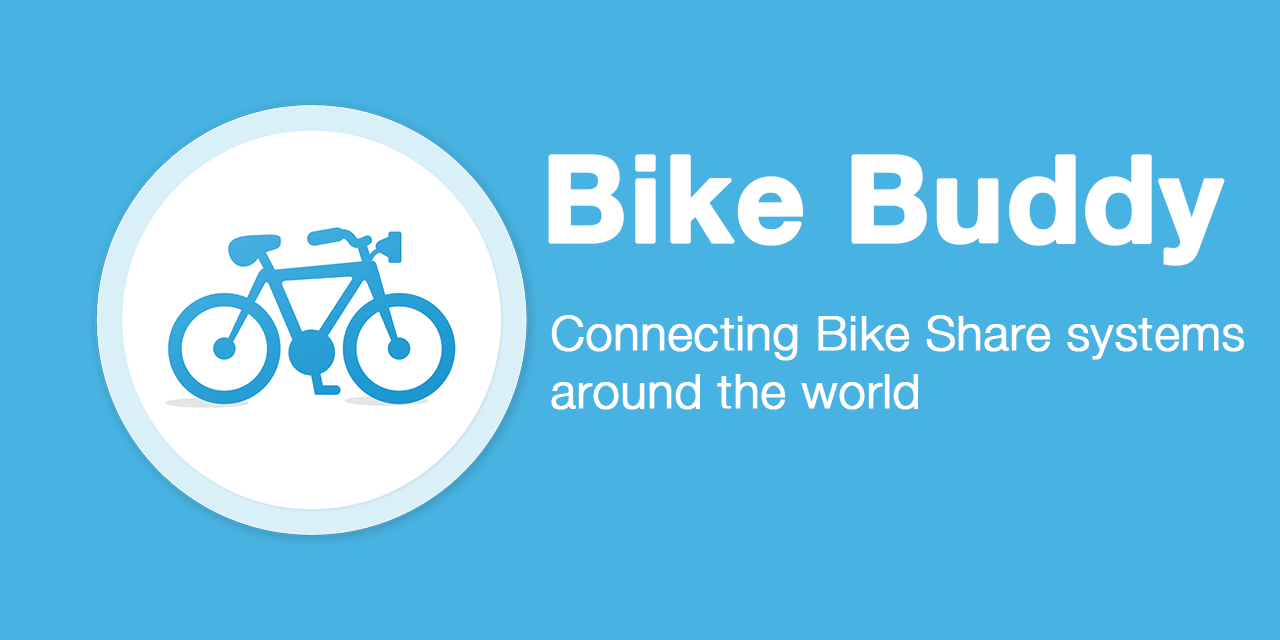
<style>
.page{position:relative;width:1280px;height:640px;background:#48b3e2}
.page>*{position:absolute;margin:0}
.t1{font:120px "HelveticaNeue-Bold";color:#ffffff;font-weight:bold}
.t2{font:48px "HelveticaNeue-Light";color:#ffffff;font-weight:bold}
</style>
<div class="page">
<p class="t1" style="left:548px;top:154px;width:677px;height:112px">Bike Buddy</p>
<p class="t2" style="left:551px;top:315px;width:693px;height:95px">Connecting Bike Share systems <br>around the world</p>
</div>
